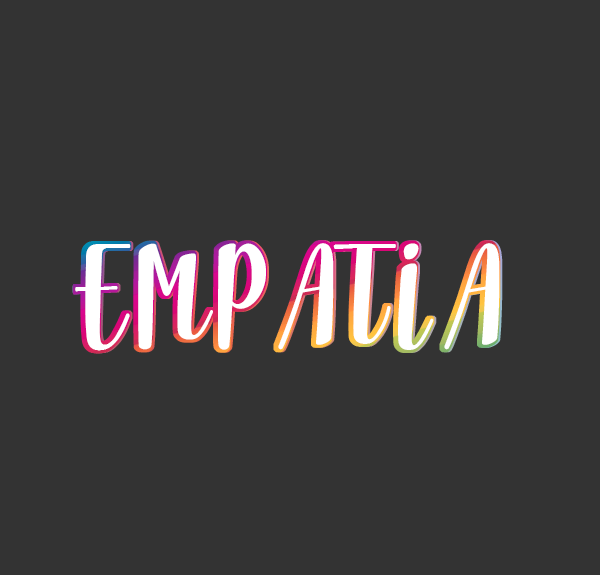
<style>
.page{position:relative;width:600px;height:575px;background:#333333}
.page>*{position:absolute;margin:0}
.t1{font:100px "Delicious-Adventures";letter-spacing:0.1em;color:#ffffff}
</style>
<div class="page">
<p class="t1" style="left:75px;top:243px;width:425px;height:108px">EMPATIA</p>
</div>
